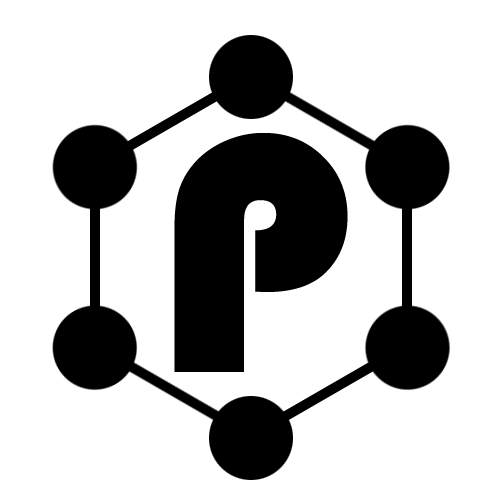
<style>
.page{position:relative;width:500px;height:500px;background:#ffffff}
.page>*{position:absolute;margin:0}
.t1{font:350px "Bauhaus93";color:#000000}
</style>
<div class="page">
<p class="t1" style="left:174px;top:133px;width:174px;height:239px">P</p>
</div>
